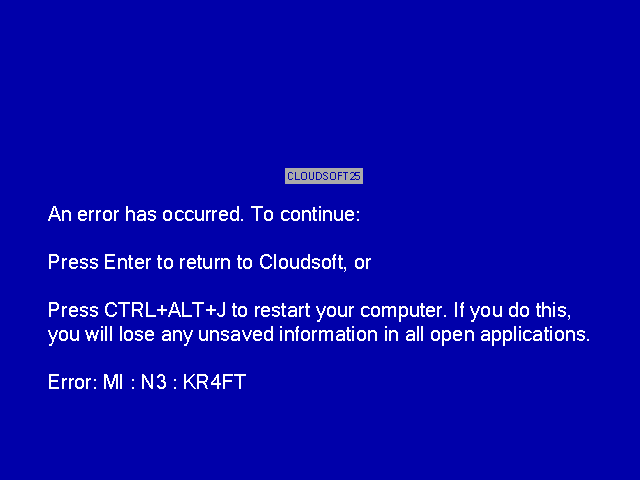
<style>
.page{position:relative;width:640px;height:480px;background:#0000aa}
.page>*{position:absolute;margin:0}
.t1{font:10.2px "MicrosoftSansSerif";color:#0000aa}
.t2{font:20px "MicrosoftSansSerif";color:#ffffff}
</style>
<div class="page">
<p class="t1" style="left:288px;top:172px;width:72px;height:8px">CLOUDSOFT25</p>
<p class="t2" style="left:48px;top:206px;width:541px;height:183px">An error has occurred. To continue:<br><br>Press Enter to return to Cloudsoft, or<br><br>Press CTRL+ALT+J to restart your computer. If you do this,<br>you will lose any unsaved information in all open applications.<br><br>Error: MI : N3 : KR4FT</p>
</div>
